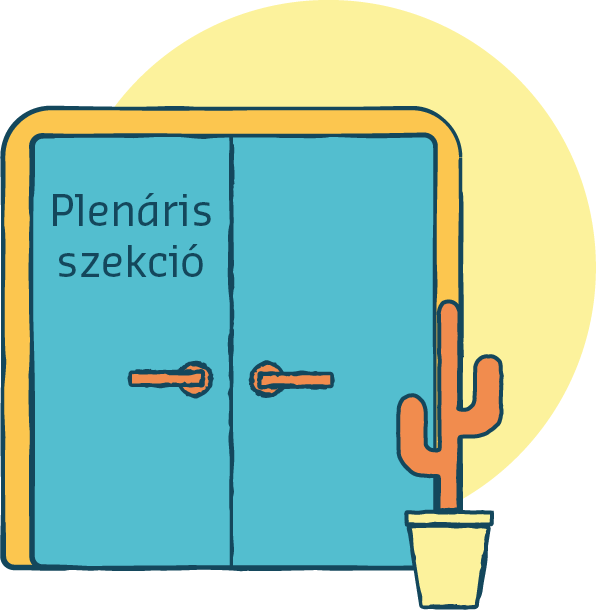
<style>
.page{position:relative;width:596px;height:610px;background:#53becf}
.page>*{position:absolute;margin:0}
.t1{font:42.8px "SansaPro-Normal";color:#14475c}
</style>
<div class="page">
<p class="t1" style="left:53px;top:193px;width:158px;height:84px;text-align:center">Plenáris<br>szekció</p>
</div>
